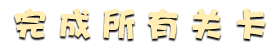
<style>
.page{position:relative;width:280px;height:48px;background:#ffffff}
.page>*{position:absolute;margin:0}
.t1{font:34px "DFPHaiBaoW12";letter-spacing:0.3em;color:#ffedb1}
</style>
<div class="page">
<p class="t1" style="left:14px;top:8px;width:252px;height:32px">完成所有关卡</p>
</div>
